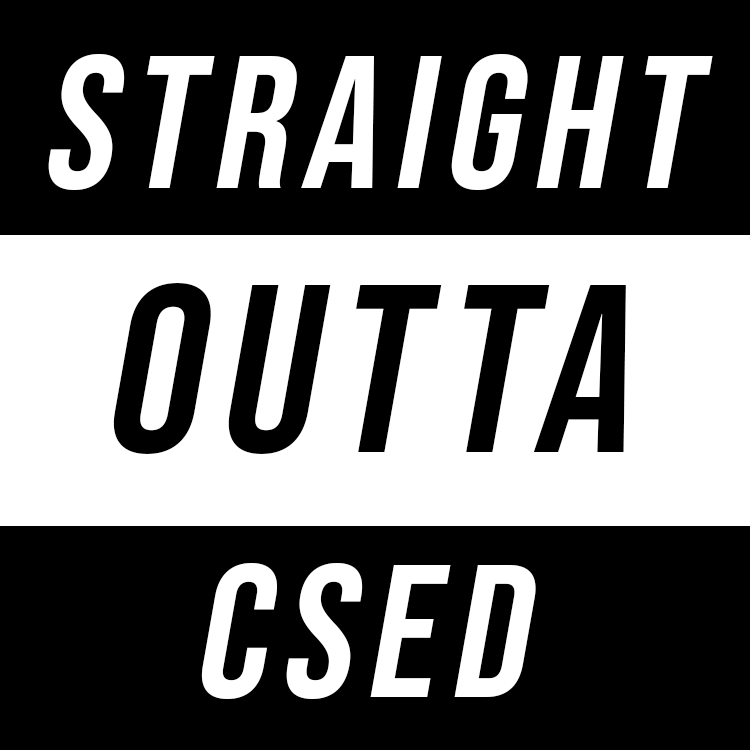
<style>
.page{position:relative;width:750px;height:750px;background:#000000}
.page>*{position:absolute;margin:0}
.t1{font:187.9px "BebasNeue-Regular";letter-spacing:0.08em;color:#ffffff;font-style:italic}
.t2{font:237.9px "BebasNeue-Regular";letter-spacing:0.08em;color:#000000;font-style:italic}
</style>
<div class="page">
<p class="t1" style="left:48px;top:54px;width:665px;height:136px">straight</p>
<p class="t2" style="left:113px;top:283px;width:513px;height:171px">outta</p>
<p class="t1" style="left:201px;top:563px;width:335px;height:136px">CSED</p>
</div>
